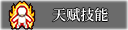
<style>
.page{position:relative;width:128px;height:30px;background:#6b6b6b}
.page>*{position:absolute;margin:0}
.t1{font:14px "SourceHanSerifCN-SemiBold";color:#ffffff;text-transform:uppercase}
</style>
<div class="page">
<p class="t1" style="left:52px;top:8px;width:56px;height:14px">天赋技能</p>
</div>
